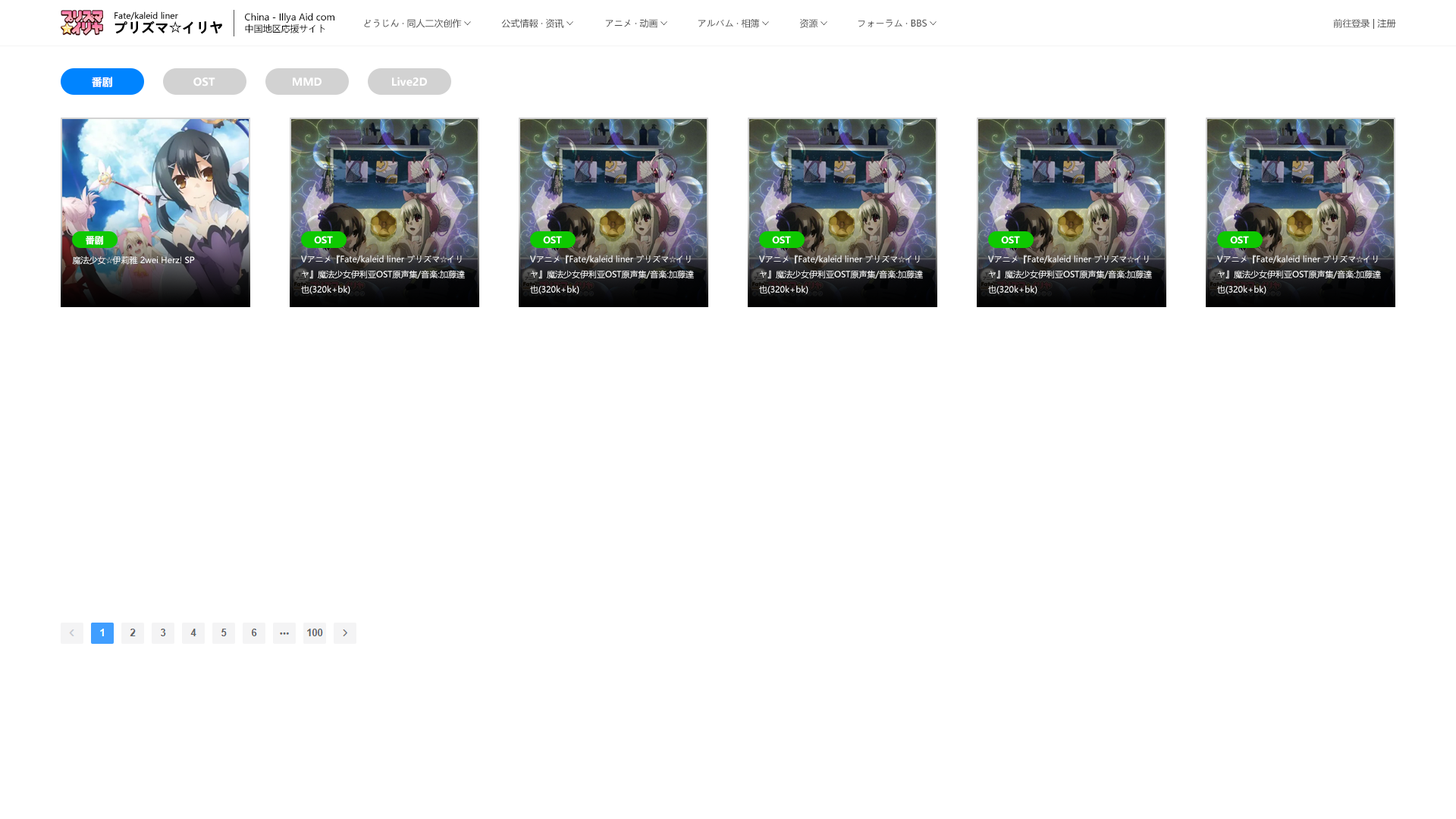
<style>
.page{position:relative;width:1456px;height:819px;background:#ffffff}
.page>*{position:absolute;margin:0}
.t1{font:8.3px "MicrosoftYaHeiUI";color:#000000}
.t2{font:9.1px "MicrosoftYaHeiUI";color:#000000}
.t3{font:13.6px "MicrosoftYaHeiUI-Bold";color:#000000}
.t4{font:13.6px "AdobeHeitiStd-Regular";color:#000000}
.t5{font:9.1px "MicrosoftYaHeiUI";color:#484848}
.t6{font:9.1px "MS-PGothic"}
.t7{font:10.6px "MicrosoftYaHeiUI-Bold";color:#ffffff}
.t8{font:9.1px "MicrosoftYaHeiUI-Bold";color:#ffffff}
.t9{font:8.3px "MicrosoftYaHeiUI";color:#ffffff}
.t10{font:8.3px/15.2px "MicrosoftYaHeiUI";color:#ffffff}
</style>
<div class="page">
<p class="t1" style="left:115px;top:11px;width:63px;height:9px">Fate/kaleid liner</p>
<p class="t2" style="left:245px;top:13px;width:89px;height:10px">China - Illya Aid com</p>
<p class="t3" style="left:115px;top:20px;width:107px;height:14px">プリズマ<span class="t4">☆</span>イリヤ</p>
<p class="t2" style="left:245px;top:24px;width:80px;height:9px">中国地区応援サイト</p>
<p class="t5" style="left:364px;top:19px;width:98px;height:9px">どうじん · 同人二次创作</p>
<p class="t6" style="left:464px;top:21px;width:7px;height:5px;rotate:90deg">&gt;</p>
<p class="t5" style="left:501px;top:18px;width:63px;height:10px">公式情報 · 资讯</p>
<p class="t6" style="left:566px;top:21px;width:7px;height:5px;rotate:90deg">&gt;</p>
<p class="t5" style="left:605px;top:19px;width:53px;height:9px">アニメ · 动画</p>
<p class="t6" style="left:660px;top:21px;width:7px;height:5px;rotate:90deg">&gt;</p>
<p class="t5" style="left:698px;top:19px;width:62px;height:9px">アルバム · 相簿</p>
<p class="t6" style="left:762px;top:21px;width:7px;height:5px;rotate:90deg">&gt;</p>
<p class="t5" style="left:799px;top:18px;width:19px;height:10px">资源</p>
<p class="t6" style="left:821px;top:21px;width:6px;height:5px;rotate:90deg">&gt;</p>
<p class="t5" style="left:858px;top:19px;width:69px;height:8px">フォーラム · BBS</p>
<p class="t6" style="left:930px;top:21px;width:7px;height:5px;rotate:90deg">&gt;</p>
<p class="t5" style="left:1333px;top:19px;width:63px;height:10px">前往登录 | 注册</p>
<p class="t7" style="left:92px;top:77px;width:20px;height:10px">番剧</p>
<p class="t7" style="left:193px;top:77px;width:22px;height:9px">OST</p>
<p class="t7" style="left:293px;top:77px;width:29px;height:9px">MMD</p>
<p class="t7" style="left:392px;top:77px;width:35px;height:9px">Live2D</p>
<p class="t8" style="left:86px;top:236px;width:17px;height:9px">番剧</p>
<p class="t8" style="left:314px;top:236px;width:19px;height:7px">OST</p>
<p class="t8" style="left:543px;top:236px;width:19px;height:7px">OST</p>
<p class="t8" style="left:772px;top:236px;width:19px;height:7px">OST</p>
<p class="t8" style="left:1001px;top:236px;width:19px;height:7px">OST</p>
<p class="t8" style="left:1230px;top:236px;width:19px;height:7px">OST</p>
<p class="t9" style="left:72px;top:256px;width:123px;height:9px">魔法少女☆伊莉雅 2wei Herz! SP</p>
<p class="t10" style="left:301px;top:255px;width:164px;height:39px">Vアニメ『Fate/kaleid liner プリズマ☆イリヤ』魔法少女伊利亚OST原声集/音楽:加藤達也(320k+bk)</p>
<p class="t10" style="left:530px;top:255px;width:164px;height:39px">Vアニメ『Fate/kaleid liner プリズマ☆イリヤ』魔法少女伊利亚OST原声集/音楽:加藤達也(320k+bk)</p>
<p class="t10" style="left:759px;top:255px;width:164px;height:39px">Vアニメ『Fate/kaleid liner プリズマ☆イリヤ』魔法少女伊利亚OST原声集/音楽:加藤達也(320k+bk)</p>
<p class="t10" style="left:988px;top:255px;width:164px;height:39px">Vアニメ『Fate/kaleid liner プリズマ☆イリヤ』魔法少女伊利亚OST原声集/音楽:加藤達也(320k+bk)</p>
<p class="t10" style="left:1217px;top:255px;width:164px;height:39px">Vアニメ『Fate/kaleid liner プリズマ☆イリヤ』魔法少女伊利亚OST原声集/音楽:加藤達也(320k+bk)</p>
</div>
